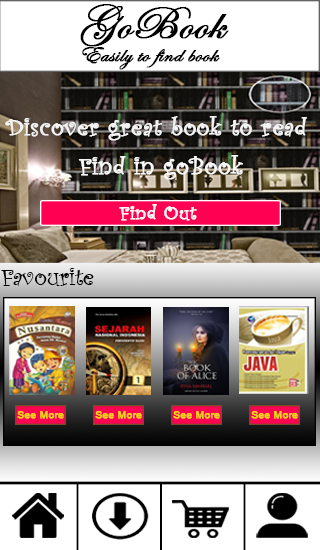
<style>
.page{position:relative;width:320px;height:550px}
.page>*{position:absolute;margin:0}
.t1{font:46.2px "EdwardianScriptITC";color:#000000;font-weight:bold;scale:1.06 1}
.t2{font:23.1px "EdwardianScriptITC";color:#000000;font-weight:bold;scale:1.06 1}
.t3{font:25.2px "CurlzMT";color:#f3f3f3;font-weight:bold;scale:1.05 1}
.t4{font:25.2px "CurlzMT";color:#f8f8f8;font-weight:bold;scale:1.06 1}
.t5{font:20.2px "CurlzMT";color:#f8f8f8;font-weight:bold;scale:1.05 1}
.t6{font:25.2px "CurlzMT";color:#000000;scale:1.05 1}
.t7{font:10.3px "ArialMT";color:#ecd514;font-weight:bold}
</style>
<div class="page">
<p class="t1" style="left:80px;top:4px;width:149px;height:43px">GoBook</p>
<p class="t2" style="left:82px;top:47px;width:138px;height:23px">Easily to find book</p>
<p class="t3" style="left:5px;top:116px;width:302px;height:25px">Discover great book to read</p>
<p class="t4" style="left:78px;top:155px;width:165px;height:25px">Find in goBook</p>
<p class="t5" style="left:119px;top:204px;width:78px;height:17px">Find Out</p>
<p class="t6" style="left:1px;top:268px;width:93px;height:18px">Favourite</p>
<p class="t7" style="left:17px;top:411px;width:47px;height:8px">See More</p>
<p class="t7" style="left:95px;top:411px;width:47px;height:8px">See More</p>
<p class="t7" style="left:173px;top:411px;width:47px;height:8px">See More</p>
<p class="t7" style="left:251px;top:411px;width:47px;height:8px">See More</p>
</div>
